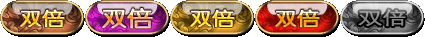
<style>
.page{position:relative;width:425px;height:37px}
.page>*{position:absolute;margin:0}
.t1{font:17.6px "STXihei";color:#868585;font-weight:bold;scale:1.38 1}
</style>
<div class="page">
<p class="t1" style="left:358px;top:9px;width:48px;height:18px">双倍</p>
</div>
